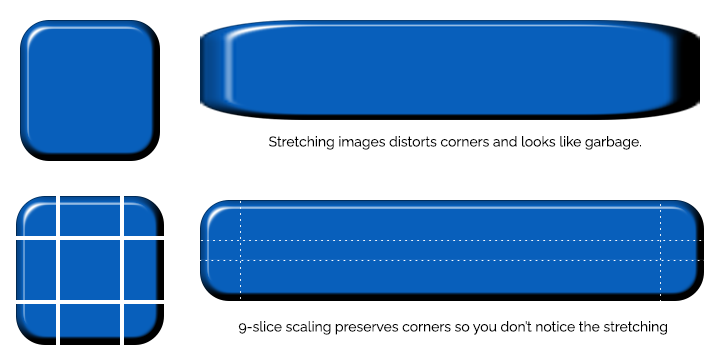
<style>
.page{position:relative;width:720px;height:360px;background:#ffffff}
.page>*{position:absolute;margin:0}
.t1{font:14px "Raleway-Regular";color:#000000}
</style>
<div class="page">
<p class="t1" style="left:269px;top:136px;width:372px;height:14px">Stretching images distorts corners and looks like garbage.</p>
<p class="t1" style="left:238px;top:321px;width:429px;height:14px">9-slice scaling preserves corners so you don’t notice the stretching</p>
</div>
